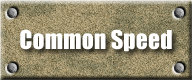
<style>
.page{position:relative;width:192px;height:80px}
.page>*{position:absolute;margin:0}
.t1{font:24px "Impact";color:#ffffff}
</style>
<div class="page">
<p class="t1" style="left:20px;top:29px;width:152px;height:23px">Common Speed</p>
</div>
